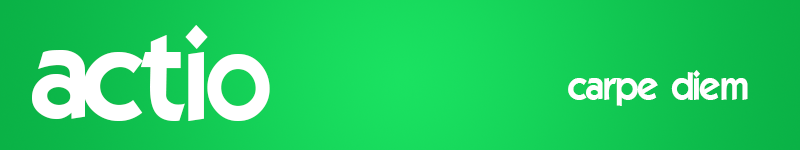
<style>
.page{position:relative;width:800px;height:150px}
.page>*{position:absolute;margin:0}
.t1{font:122px "ELEGANCE";color:#ffffff}
.t2{font:38px "ELEGANCE";color:#ffffff}
</style>
<div class="page">
<p class="t1" style="left:32px;top:25px;width:238px;height:96px">actio</p>
<p class="t2" style="left:568px;top:70px;width:180px;height:36px">carpe diem</p>
</div>
